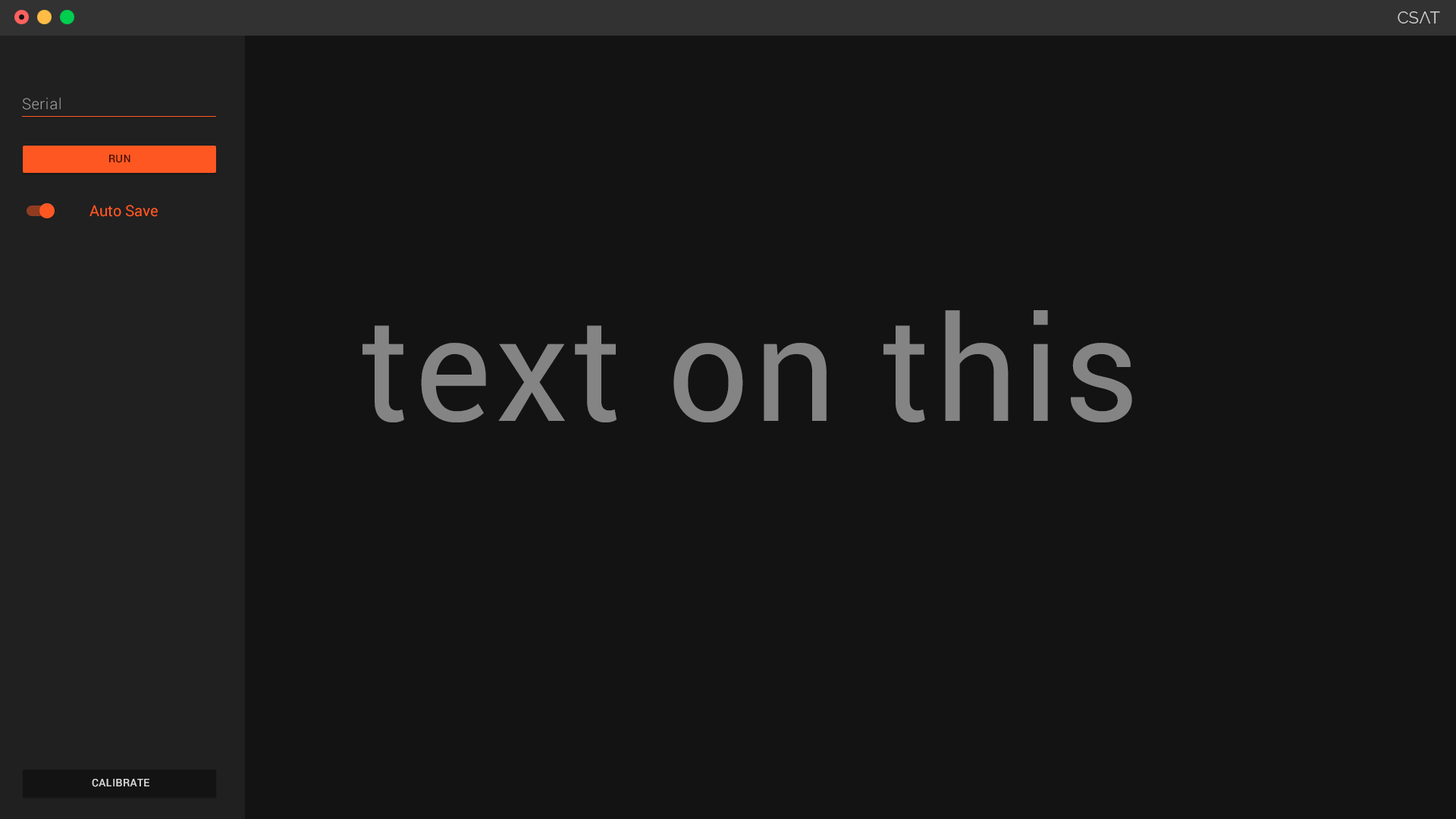
<style>
.page{position:relative;width:1456px;height:819px;background:#131313}
.page>*{position:absolute;margin:0}
.t1{font:15.2px "Roboto-Light";letter-spacing:0.03em;color:#9b9b9b}
.t2{font:10.6px "Roboto-Medium";letter-spacing:0.03em;color:#400f03}
.t3{font:15.2px "Roboto-Regular";color:#ff5722}
.t4{font:144.8px "Roboto-Regular";letter-spacing:0.03em;color:#848484}
.t5{font:10.6px "Roboto-Medium";letter-spacing:0.03em;color:#eeeeee}
</style>
<div class="page">
<p class="t1" style="left:23px;top:97px;width:38px;height:13px">Serial</p>
<p class="t2" style="left:109px;top:155px;width:21px;height:8px">RUN</p>
<p class="t3" style="left:89px;top:205px;width:69px;height:12px">Auto Save</p>
<p class="t4" style="left:362px;top:310px;width:770px;height:112px">text on this</p>
<p class="t5" style="left:92px;top:779px;width:57px;height:8px;opacity:0.87">CALIBRATE</p>
</div>
